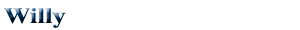
<style>
.page{position:relative;width:300px;height:30px;background:#ffffff}
.page>*{position:absolute;margin:0}
.t1{font:22.2px "TimesNewRomanPS-BoldMT";letter-spacing:0.01em;scale:1.18 1}
</style>
<div class="page">
<p class="t1" style="left:4px;top:7px;width:62px;height:21px">Willy</p>
</div>
